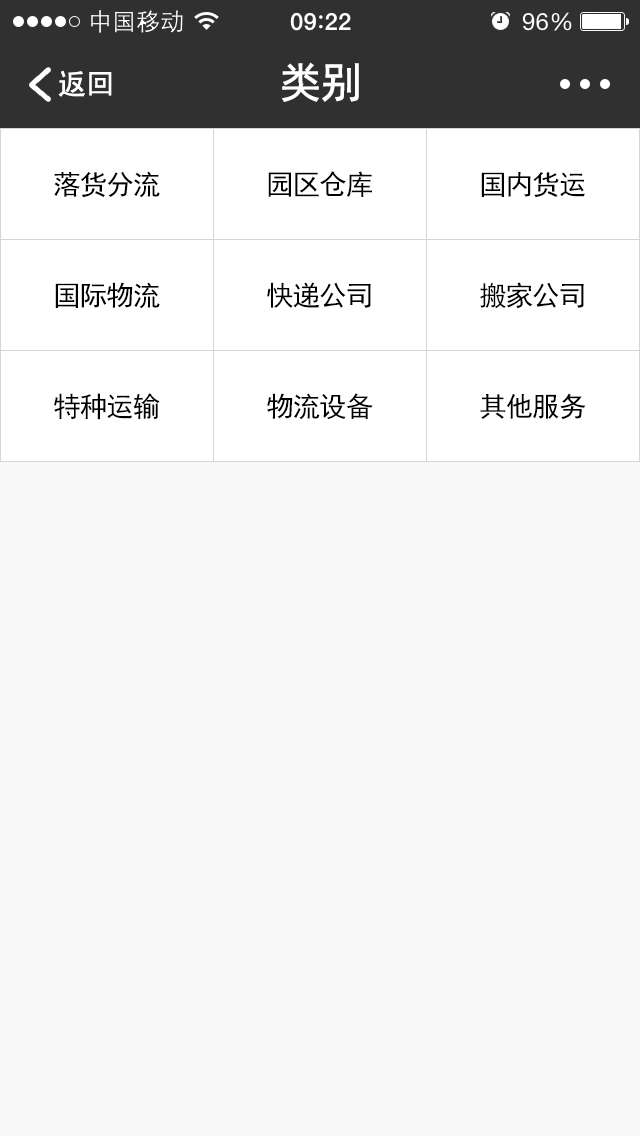
<style>
.page{position:relative;width:640px;height:1136px;background:#f8f8f8}
.page>*{position:absolute;margin:0}
.t1{font:42px "SimHei";letter-spacing:-0.04em;color:#ffffff;font-weight:bold}
.t2{font:28px "SimHei";color:#ffffff;font-weight:bold}
.t3{font:27.7px "SimHei";letter-spacing:-0.04em;color:#000000}
</style>
<div class="page">
<p class="t1" style="left:282px;top:62px;width:77px;height:40px">类别</p>
<p class="t2" style="left:58px;top:70px;width:54px;height:27px">返回</p>
<p class="t3" style="left:54px;top:171px;width:106px;height:27px">落货分流</p>
<p class="t3" style="left:268px;top:171px;width:104px;height:26px">园区仓库</p>
<p class="t3" style="left:481px;top:171px;width:104px;height:27px">国内货运</p>
<p class="t3" style="left:55px;top:282px;width:105px;height:27px">国际物流</p>
<p class="t3" style="left:267px;top:282px;width:104px;height:26px">快递公司</p>
<p class="t3" style="left:480px;top:282px;width:104px;height:27px">搬家公司</p>
<p class="t3" style="left:54px;top:393px;width:106px;height:27px">特种运输</p>
<p class="t3" style="left:267px;top:393px;width:106px;height:27px">物流设备</p>
<p class="t3" style="left:480px;top:393px;width:106px;height:27px">其他服务</p>
</div>
